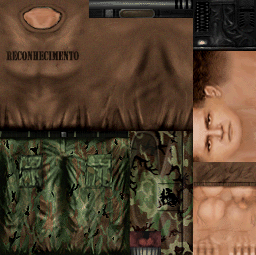
<style>
.page{position:relative;width:256px;height:255px}
.page>*{position:absolute;margin:0}
.t1{font:13.3px "Army";letter-spacing:-0.02em;color:#1b110b;text-transform:uppercase;font-weight:bold;scale:0.62 1}
</style>
<div class="page">
<p class="t1" style="left:6px;top:51px;width:73px;height:10px">reconhecimento</p>
</div>
